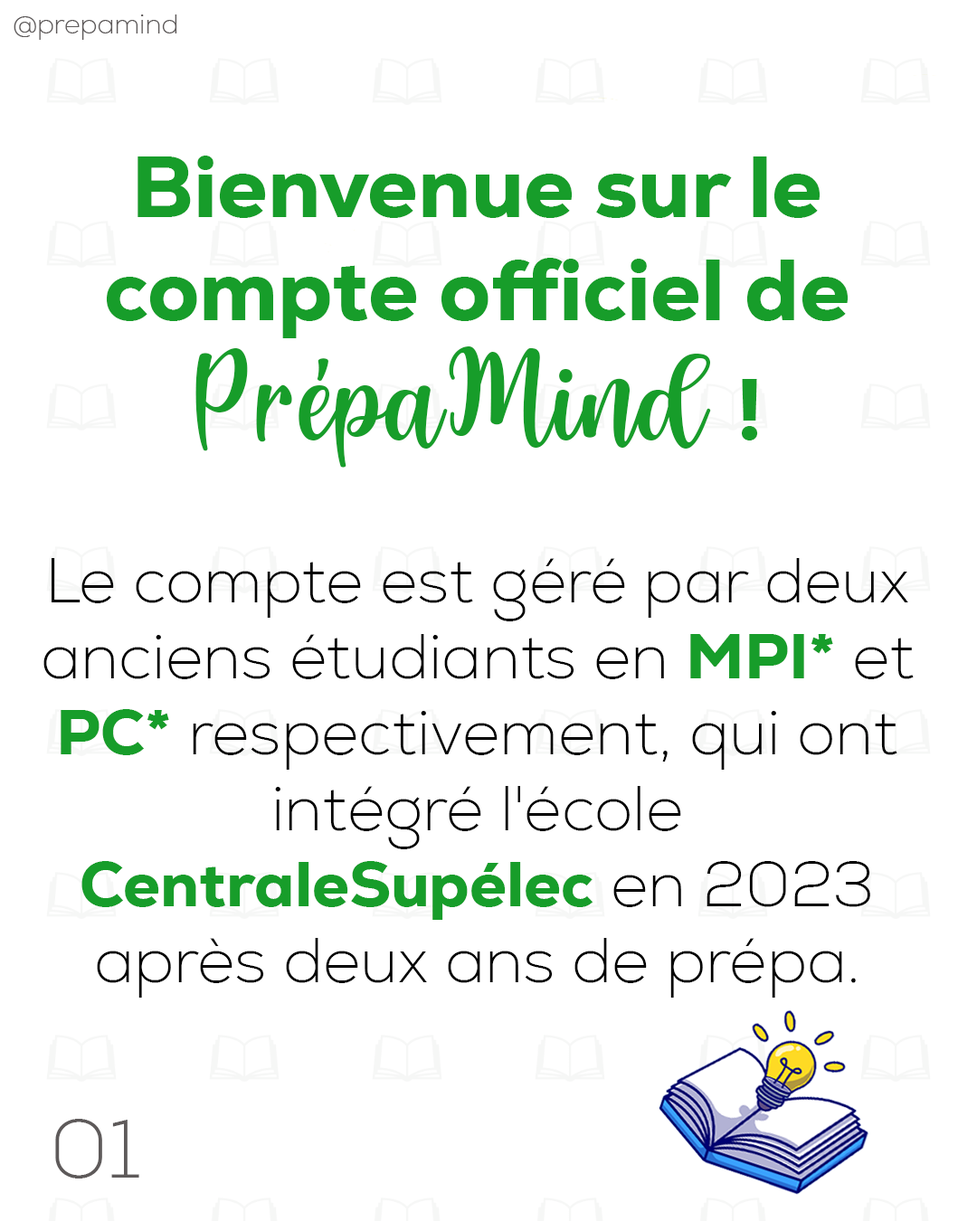
<style>
.page{position:relative;width:977px;height:1221px;background:#ffffff}
.page>*{position:absolute;margin:0}
.t1{font:27.1px "Nexa-ExtraLight";color:#5e5a5a}
.t2{font:63.3px "Nexa-ExtraLight";color:#000000}
.t3{font:85.9px "Nexa-Heavy";color:#179d2a}
.t4{font:99.5px "HarmonyScript";color:#179d2a}
.t5{font:63.3px "Nexa-Heavy";color:#179d2a}
.t6{font:81.7px "Nexa-ExtraLight";color:#5e5a5a}
</style>
<div class="page">
<p class="t1" style="left:14px;top:14px;width:163px;height:26px">@prepamind</p>
<p class="t2" style="left:43px;top:156px;width:870px;height:842px;text-align:center"><span class="t3">Bienvenue sur le compte officiel de </span><span class="t4">PrépaMind </span><span class="t3">!<br><br></span>Le compte est géré par deux anciens étudiants en <span class="t5">MPI*</span> et <span class="t5">PC*</span> respectivement, qui ont intégré l'école <span class="t5">CentraleSupélec</span> en 2023 après deux ans de prépa.</p>
<p class="t6" style="left:55px;top:1119px;width:84px;height:59px">01</p>
</div>
